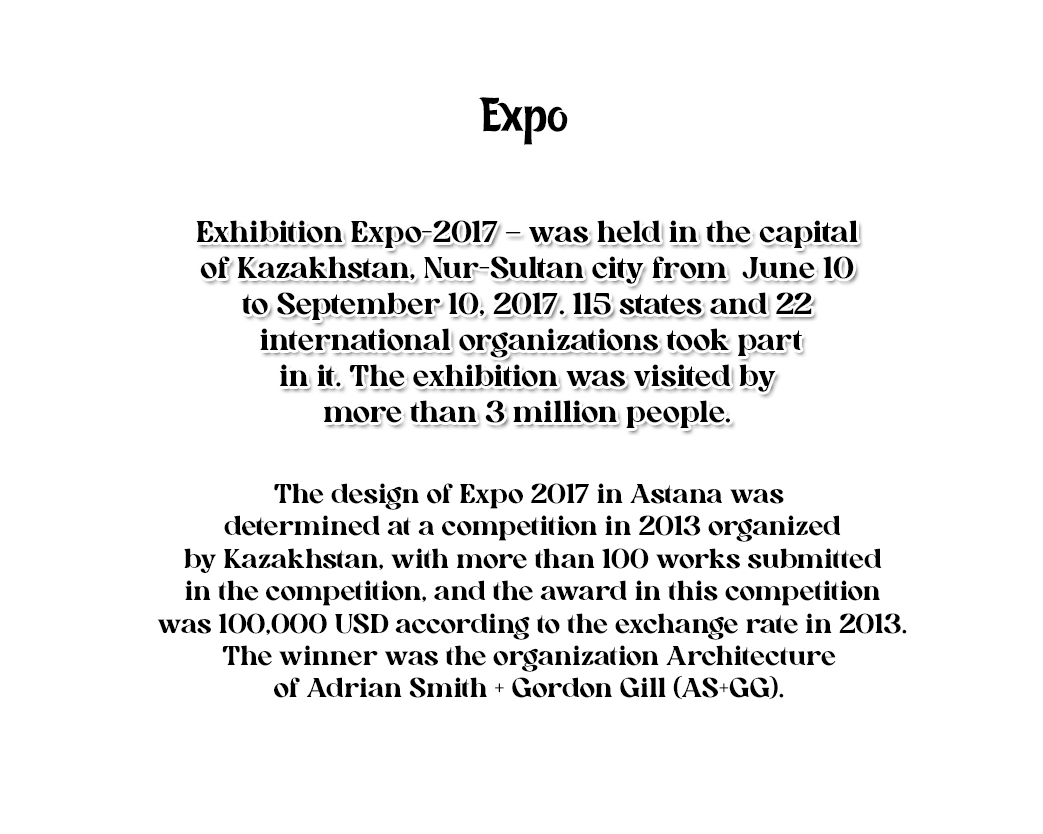
<style>
.page{position:relative;width:1043px;height:834px;background:#ffffff}
.page>*{position:absolute;margin:0}
.t1{font:48px "KZ_Tangak-Regular";color:#000000}
.t2{font:30px "AllenoireFreePersonal-Regular";color:#000000}
.t3{font:27px "AllenoireFreePersonal-Regular";color:#000000}
</style>
<div class="page">
<p class="t1" style="left:478px;top:97px;width:90px;height:48px">Expo</p>
<p class="t2" style="left:196px;top:220px;width:662px;height:208px;text-align:center">Exhibition Expo-2017 – was held in the capital<br>of Kazakhstan, Nur-Sultan city from  June 10<br>to September 10, 2017. 115 states and 22<br> international organizations took part<br>in it. The exhibition was visited by<br>more than 3 million people.</p>
<p class="t3" style="left:157px;top:483px;width:750px;height:216px;text-align:center">The design of Expo 2017 in Astana was<br> determined at a competition in 2013 organized<br> by Kazakhstan, with more than 100 works submitted<br> in the competition, and the award in this competition<br> was 100,000 USD according to the exchange rate in 2013.<br>The winner was the organization Architecture<br>of Adrian Smith + Gordon Gill (AS+GG).</p>
</div>
